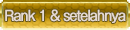
<style>
.page{position:relative;width:130px;height:30px}
.page>*{position:absolute;margin:0}
.t1{font:14px "GothicMB101Pro-Regular";letter-spacing:-0.08em;color:#e6dad2;font-weight:bold;scale:0.9 1}
</style>
<div class="page">
<p class="t1" style="left:5px;top:9px;width:121px;height:14px">Rank 1 &amp; setelahnya</p>
</div>
